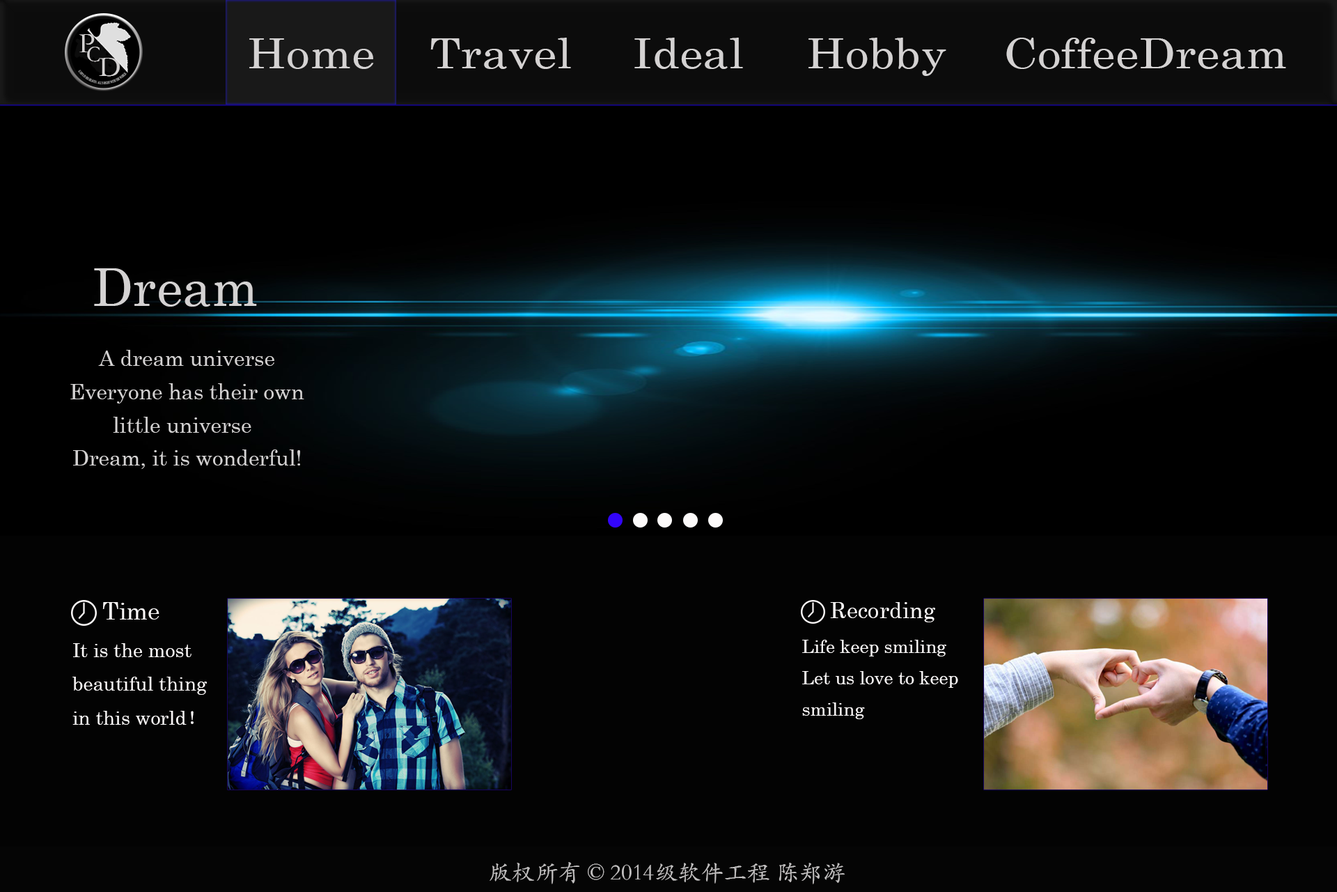
<style>
.page{position:relative;width:1337px;height:892px;background:#030303}
.page>*{position:absolute;margin:0}
.t1{font:28.8px "STKaiti";color:#d4d2d2}
.t2{font:41.6px "CenturySchoolbook";color:#d4d2d2;scale:1.13 1}
.t3{font:22.4px "STKaiti";color:#d4d2d2}
.t4{font:52.2px "CenturySchoolbook";color:#d4d2d2}
.t5{font:21.8px "CenturySchoolbook";color:#d4d2d2}
.t6{font:24.2px "CenturySchoolbook";color:#fbf8f8}
.t7{font:22.5px "CenturySchoolbook";color:#fbf8f8}
.t8{font:18px "CenturySchoolbook";color:#fbf8f8}
.t9{font:19.4px "CenturySchoolbook";color:#fbf8f8}
.t10{font:19.4px "SimSun";color:#fbf8f8}
.t11{font:23.2px "STKaiti";color:#d4d2d2}
</style>
<div class="page">
<p class="t1" style="left:79px;top:34px;width:16px;height:19px">P</p>
<p class="t2" style="left:249px;top:38px;width:125px;height:31px">Home</p>
<p class="t2" style="left:430px;top:38px;width:141px;height:31px">Travel</p>
<p class="t2" style="left:635px;top:38px;width:108px;height:31px">Ideal</p>
<p class="t2" style="left:809px;top:38px;width:138px;height:38px">Hobby</p>
<p class="t2" style="left:1007px;top:38px;width:280px;height:31px">CoffeeDream</p>
<p class="t3" style="left:87px;top:47px;width:13px;height:15px">C</p>
<p class="t1" style="left:99px;top:58px;width:21px;height:19px">D</p>
<p class="t4" style="left:94px;top:268px;width:163px;height:38px">Dream</p>
<p class="t5" style="left:98px;top:350px;width:176px;height:16px">A dream universe</p>
<p class="t5" style="left:70px;top:383px;width:234px;height:20px">Everyone has their own</p>
<p class="t5" style="left:113px;top:417px;width:138px;height:16px">little universe</p>
<p class="t5" style="left:73px;top:449px;width:227px;height:20px">Dream, it is wonderful!</p>
<p class="t6" style="left:102px;top:602px;width:58px;height:17px">Time</p>
<p class="t7" style="left:830px;top:602px;width:105px;height:20px">Recording</p>
<p class="t8" style="left:802px;top:639px;width:156px;height:80px">Life keep smiling<br>Let us love to keep <br>smiling</p>
<p class="t9" style="left:72px;top:643px;width:135px;height:81px">It is the most <br>beautiful thing <br>in this world<span class="t10">！</span></p>
<p class="t11" style="left:490px;top:862px;width:355px;height:22px">版权所有 © 2014级软件工程 陈郑游</p>
</div>
